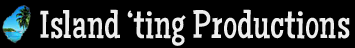
<style>
.page{position:relative;width:355px;height:48px;background:#000000}
.page>*{position:absolute;margin:0}
.t1{font:39.9px "MaidenOrange-Regular";color:#eeeeee}
</style>
<div class="page">
<p class="t1" style="left:40px;top:9px;width:310px;height:37px">Island ‘ting Productions</p>
</div>
